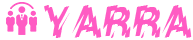
<style>
.page{position:relative;width:193px;height:40px;background:#ffffff}
.page>*{position:absolute;margin:0}
.t1{font:42.8px "18";color:#ff5bc3}
</style>
<div class="page">
<p class="t1" style="left:44px;top:5px;width:148px;height:33px">YARRA</p>
</div>
